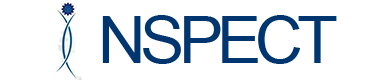
<style>
.page{position:relative;width:384px;height:80px;background:#ffffff}
.page>*{position:absolute;margin:0}
.t1{font:65.3px "ArialNarrow";letter-spacing:-0.075em;color:#00366f;scale:1.25 1}
</style>
<div class="page">
<p class="t1" style="left:102px;top:15px;width:235px;height:49px">NSPECT</p>
</div>
